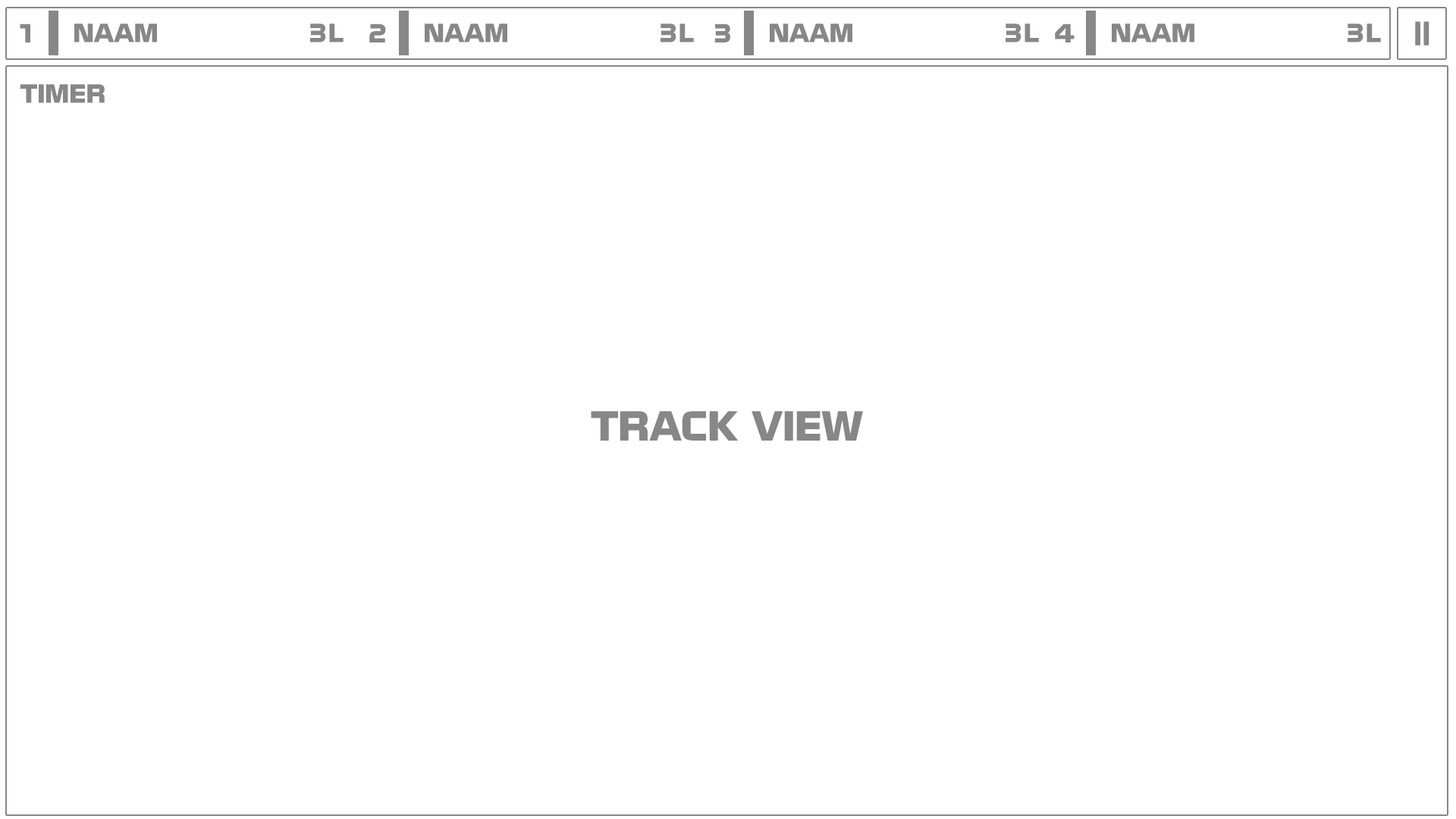
<style>
.page{position:relative;width:1456px;height:819px;background:#ffffff}
.page>*{position:absolute;margin:0}
.t1{font:22.7px "NissanOpti";color:#878787}
.t2{font:27.3px "NissanOpti";color:#878787}
.t3{font:36.4px "NissanOpti";color:#878787}
</style>
<div class="page">
<p class="t1" style="left:20px;top:24px;width:10px;height:18px">1</p>
<p class="t1" style="left:74px;top:24px;width:83px;height:18px">NAAM</p>
<p class="t1" style="left:310px;top:24px;width:34px;height:18px">3L</p>
<p class="t1" style="left:369px;top:24px;width:17px;height:18px">2</p>
<p class="t1" style="left:425px;top:24px;width:82px;height:18px">NAAM</p>
<p class="t1" style="left:660px;top:24px;width:34px;height:18px">3L</p>
<p class="t1" style="left:714px;top:24px;width:16px;height:18px">3</p>
<p class="t1" style="left:770px;top:24px;width:82px;height:18px">NAAM</p>
<p class="t1" style="left:1006px;top:24px;width:33px;height:18px">3L</p>
<p class="t1" style="left:1055px;top:24px;width:20px;height:18px">4</p>
<p class="t1" style="left:1112px;top:24px;width:82px;height:18px">NAAM</p>
<p class="t1" style="left:1348px;top:24px;width:33px;height:18px">3L</p>
<p class="t2" style="left:1415px;top:21px;width:14px;height:24px;rotate:90deg">=</p>
<p class="t1" style="left:20px;top:84px;width:85px;height:19px">TIMER</p>
<p class="t3" style="left:591px;top:411px;width:272px;height:30px">TRACK VIEW</p>
</div>
